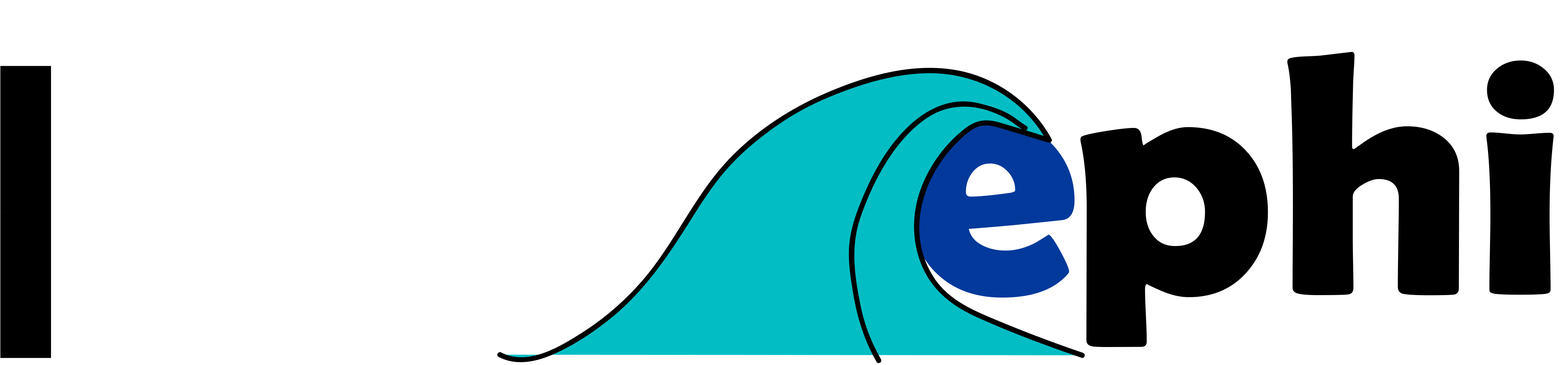
<style>
.page{position:relative;width:1568px;height:365px;background:#ffffff}
.page>*{position:absolute;margin:0}
.t1{font:347.1px "BerlinSansFBDemi-Bold";color:#000000}
.t2{font:347.1px "BerlinSansFBDemi-Bold";color:#03399c}
</style>
<div class="page">
<p class="t1" style="left:1080px;top:52px;width:474px;height:295px">phi</p>
<p class="t2" style="left:911px;top:120px;width:164px;height:177px">e</p>
</div>
